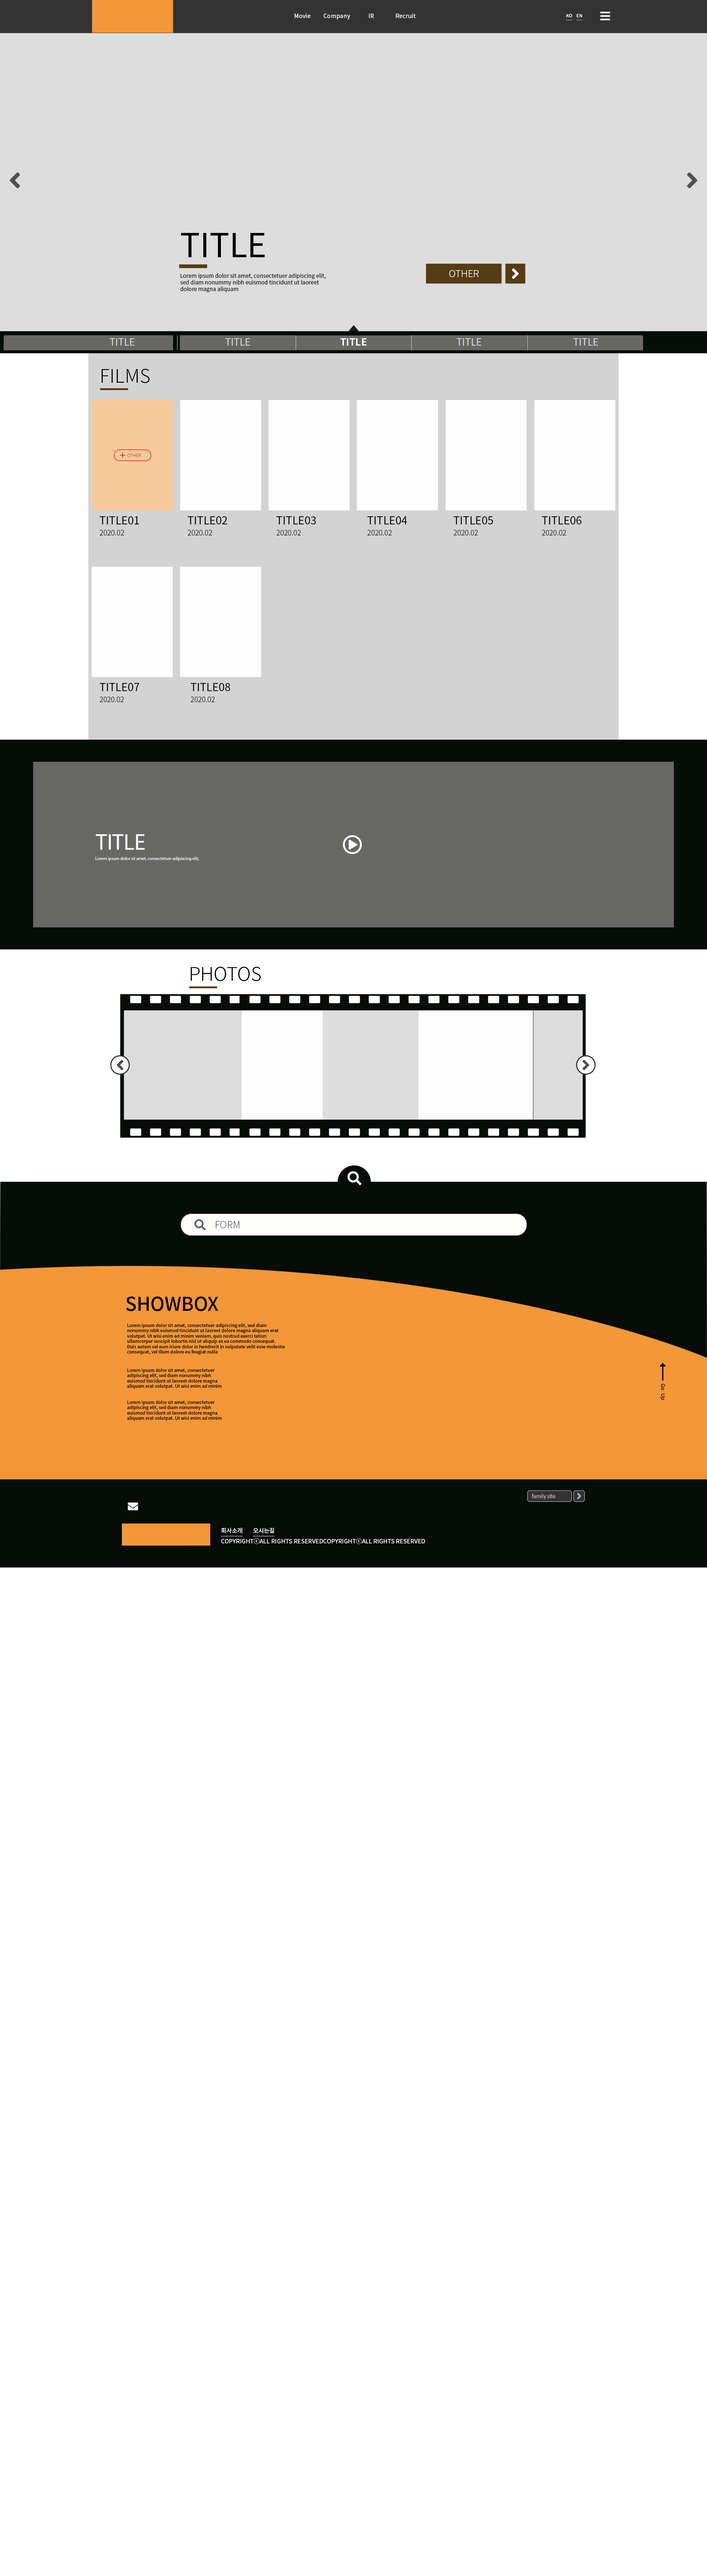
<style>
.page{position:relative;width:707px;height:2576px;background:#ffffff}
.page>*{position:absolute;margin:0}
.t1{font:5.9px "NotoSansKR-Medium";color:#ffffff}
.t2{font:4.4px "NotoSansKR-Medium";color:#ffffff;text-transform:uppercase;text-decoration:underline}
.t3{font:33px "NotoSansKR-Regular";color:#000000}
.t4{font:5.5px "NotoSansKR-Regular";color:#000000}
.t5{font:9.4px "NotoSansKR-Light";color:#fdfdfc}
.t6{font:9.7px "NotoSansKR-Regular";color:#dddddd}
.t7{font:9.7px "NotoSansKR-Bold";color:#fdfdfd}
.t8{font:18.8px "NotoSansKR-Light";color:#000000}
.t9{font:4.4px "NotoSans-Light";color:#e42328}
.t10{font:10.8px "NotoSansKR-Regular";color:#000000}
.t11{font:7.1px "NotoSansKR-Light";color:#000000}
.t12{font:22.5px "MyriadPro-Regular";color:#fdfdfd}
.t13{font:4.4px "MyriadPro-Regular";color:#fdfdfd}
.t14{font:18.8px "NotoSansKR-Light";color:#000000;text-transform:uppercase}
.t15{font:9.7px "NotoSansKR-Light";color:#676767}
.t16{font:18.8px "NotoSansKR-Medium";color:#000000;text-transform:uppercase}
.t17{font:4.4px "NotoSansKR-Medium";color:#000000}
.t18{font:5.2px "NotoSansKR-Light";color:#dcdcdc}
.t19{font:5.9px "NotoSansKR-Medium";color:#ffffff;text-decoration:underline}
</style>
<div class="page">
<p class="t1" style="left:294px;top:13px;width:16px;height:5px">Movie</p>
<p class="t1" style="left:323px;top:14px;width:27px;height:6px">Company</p>
<p class="t1" style="left:369px;top:14px;width:5px;height:4px">IR</p>
<p class="t1" style="left:396px;top:13px;width:19px;height:5px">Recruit</p>
<p class="t2" style="left:566px;top:14px;width:6px;height:6px">ko</p>
<p class="t2" style="left:576px;top:14px;width:6px;height:6px">en</p>
<p class="t3" style="left:181px;top:233px;width:84px;height:24px">TITLE</p>
<p class="t4" style="left:180px;top:273px;width:146px;height:19px">Lorem ipsum dolor sit amet, consectetuer adipiscing elit, sed diam nonummy nibh euismod tincidunt ut laoreet dolore magna aliquam</p>
<p class="t5" style="left:449px;top:270px;width:30px;height:7px">OTHER</p>
<p class="t6" style="left:110px;top:338px;width:24px;height:8px">TITLE</p>
<p class="t6" style="left:225px;top:338px;width:25px;height:8px">TITLE</p>
<p class="t7" style="left:340px;top:338px;width:27px;height:8px">TITLE</p>
<p class="t6" style="left:456px;top:338px;width:25px;height:8px">TITLE</p>
<p class="t6" style="left:573px;top:338px;width:25px;height:8px">TITLE</p>
<p class="t8" style="left:102px;top:369px;width:47px;height:14px">FILMS</p>
<p class="t9" style="left:127px;top:454px;width:14px;height:3px">OTHER</p>
<p class="t10" style="left:99px;top:516px;width:40px;height:8px">TITLE01</p>
<p class="t10" style="left:187px;top:516px;width:40px;height:8px">TITLE02</p>
<p class="t10" style="left:276px;top:516px;width:40px;height:8px">TITLE03</p>
<p class="t10" style="left:367px;top:516px;width:40px;height:8px">TITLE04</p>
<p class="t10" style="left:453px;top:516px;width:40px;height:8px">TITLE05</p>
<p class="t10" style="left:541px;top:516px;width:40px;height:8px">TITLE06</p>
<p class="t11" style="left:100px;top:530px;width:24px;height:5px">2020.02</p>
<p class="t11" style="left:188px;top:530px;width:24px;height:5px">2020.02</p>
<p class="t11" style="left:276px;top:530px;width:25px;height:5px">2020.02</p>
<p class="t11" style="left:367px;top:530px;width:25px;height:5px">2020.02</p>
<p class="t11" style="left:453px;top:530px;width:25px;height:5px">2020.02</p>
<p class="t11" style="left:542px;top:530px;width:24px;height:5px">2020.02</p>
<p class="t10" style="left:99px;top:683px;width:40px;height:8px">TITLE07</p>
<p class="t10" style="left:190px;top:683px;width:40px;height:8px">TITLE08</p>
<p class="t11" style="left:100px;top:697px;width:24px;height:5px">2020.02</p>
<p class="t11" style="left:191px;top:697px;width:24px;height:5px">2020.02</p>
<p class="t12" style="left:96px;top:834px;width:49px;height:16px">TITLE</p>
<p class="t13" style="left:95px;top:857px;width:104px;height:4px">Lorem ipsum dolor sit amet, consectetuer adipiscing elit,</p>
<p class="t14" style="left:191px;top:967px;width:70px;height:14px">PHOTOS</p>
<p class="t15" style="left:216px;top:1221px;width:23px;height:7px">FORM</p>
<p class="t16" style="left:126px;top:1296px;width:92px;height:15px">showbox</p>
<p class="t17" style="left:127px;top:1323px;width:158px;height:32px">Lorem ipsum dolor sit amet, consectetuer adipiscing elit, sed diam nonummy nibh euismod tincidunt ut laoreet dolore magna aliquam erat volutpat. Ut wisi enim ad minim veniam, quis nostrud exerci tation ullamcorper suscipit lobortis nisl ut aliquip ex ea commodo consequat. Duis autem vel eum iriure dolor in hendrerit in vulputate velit esse molestie consequat, vel illum dolore eu feugiat nulla</p>
<p class="t17" style="left:127px;top:1368px;width:95px;height:21px">Lorem ipsum dolor sit amet, consectetuer adipiscing elit, sed diam nonummy nibh euismod tincidunt ut laoreet dolore magna aliquam erat volutpat. Ut wisi enim ad minim veniam,</p>
<p class="t17" style="left:127px;top:1400px;width:95px;height:21px">Lorem ipsum dolor sit amet, consectetuer adipiscing elit, sed diam nonummy nibh euismod tincidunt ut laoreet dolore magna aliquam erat volutpat. Ut wisi enim ad minim veniam,</p>
<p class="t18" style="left:531px;top:1494px;width:24px;height:5px">family site</p>
<p class="t19" style="left:221px;top:1528px;width:22px;height:8px">회사소개</p>
<p class="t19" style="left:253px;top:1528px;width:22px;height:8px">오시는길</p>
<p class="t1" style="left:221px;top:1538px;width:204px;height:6px">COPYRIGHTⓒALL RIGHTS RESERVEDCOPYRIGHTⓒALL RIGHTS RESERVED</p>
</div>
